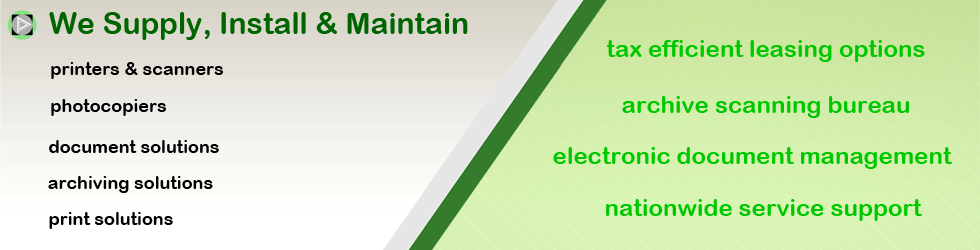
<style>
.page{position:relative;width:980px;height:250px}
.page>*{position:absolute;margin:0}
.t1{font:30px "ArialRoundedMTBold";color:#006400}
.t2{font:24px "ArialRoundedMTBold";color:#00c800}
.t3{font:18px "ArialRoundedMTBold";color:#000000}
</style>
<div class="page">
<p class="t1" style="left:49px;top:12px;width:419px;height:28px">We Supply, Install &amp; Maintain</p>
<p class="t2" style="left:606px;top:40px;width:319px;height:22px">tax efficient leasing options</p>
<p class="t3" style="left:51px;top:62px;width:172px;height:17px">printers &amp; scanners</p>
<p class="t3" style="left:51px;top:99px;width:115px;height:17px">photocopiers</p>
<p class="t2" style="left:622px;top:96px;width:287px;height:22px">archive scanning bureau</p>
<p class="t3" style="left:49px;top:140px;width:170px;height:13px">document solutions</p>
<p class="t2" style="left:553px;top:147px;width:399px;height:22px">electronic document management</p>
<p class="t3" style="left:48px;top:176px;width:165px;height:17px">archiving solutions</p>
<p class="t2" style="left:606px;top:199px;width:316px;height:22px">nationwide service support</p>
<p class="t3" style="left:49px;top:212px;width:124px;height:17px">print solutions</p>
</div>
